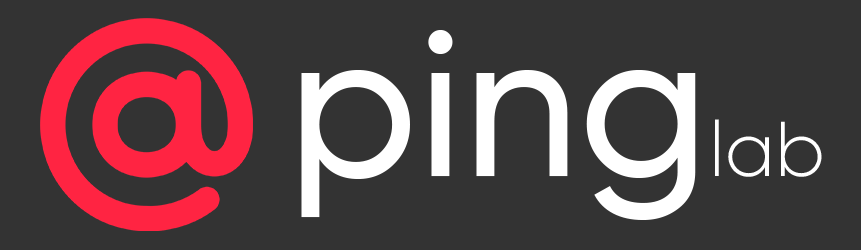
<style>
.page{position:relative;width:861px;height:250px;background:#333333}
.page>*{position:absolute;margin:0}
.t1{font:205.3px "Gilroy-Medium";color:#ffffff}
.t2{font:77.3px "Gilroy-Light";color:#ffffff}
</style>
<div class="page">
<p class="t1" style="left:301px;top:30px;width:521px;height:190px">ping<span class="t2">lab</span></p>
</div>
